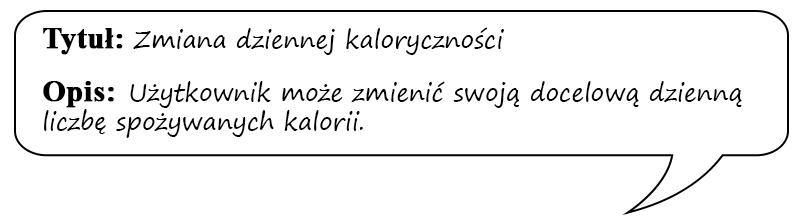
<style>
.page{position:relative;width:800px;height:220px;background:#ffffff}
.page>*{position:absolute;margin:0}
.t1{font:24px "SegoePrint";color:#000000}
.t2{font:30px "TimesNewRomanPS-BoldMT";color:#000000;font-weight:bold}
</style>
<div class="page">
<p class="t1" style="left:43px;top:27px;width:699px;height:111px"><span class="t2">Tytuł: </span>Zmiana dziennej kaloryczności<br><br><span class="t2">Opis:  </span>Użytkownik może zmienić swoją docelową dzienną liczbę spożywanych kalorii.</p>
</div>
